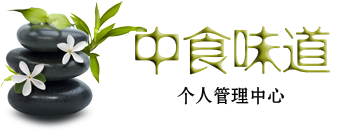
<style>
.page{position:relative;width:352px;height:131px;background:#ffffff}
.page>*{position:absolute;margin:0}
.t1{font:50px "FZXSHJW--GB1-0"}
.t2{font:18px "FZSHJW--GB1-0";color:#040404}
</style>
<div class="page">
<p class="t1" style="left:135px;top:26px;width:195px;height:49px">中食味道</p>
<p class="t2" style="left:177px;top:86px;width:107px;height:19px">个人管理中心</p>
</div>
